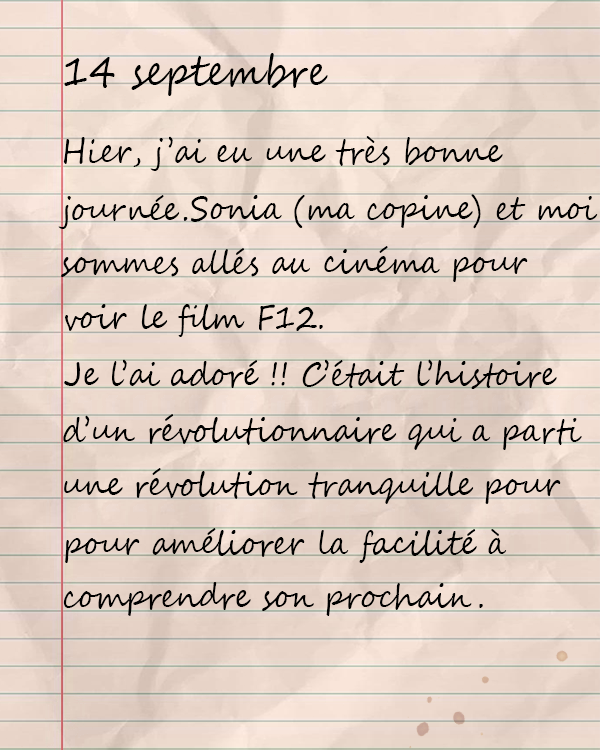
<style>
.page{position:relative;width:600px;height:750px}
.page>*{position:absolute;margin:0}
.t1{font:41.8px "SegoeScript";color:#000000;scale:0.9 1}
.t2{font:33.3px "SegoeScript";color:#000000;scale:0.9 1}
</style>
<div class="page">
<p class="t1" style="left:64px;top:53px;width:264px;height:43px">14 septembre</p>
<p class="t2" style="left:63px;top:136px;width:440px;height:35px">Hier, j’ai eu une très bonne</p>
<p class="t2" style="left:58px;top:195px;width:130px;height:34px">journée.</p>
<p class="t2" style="left:191px;top:194px;width:407px;height:35px">Sonia (ma copine) et moi</p>
<p class="t2" style="left:61px;top:246px;width:467px;height:36px">sommes allés au cinéma pour</p>
<p class="t2" style="left:65px;top:304px;width:258px;height:33px">voir le film F12.</p>
<p class="t2" style="left:64px;top:359px;width:493px;height:30px">Je l’ai adoré !! C’était l’histoire</p>
<p class="t2" style="left:63px;top:414px;width:519px;height:36px">d’un révolutionnaire qui a parti une révolution</p>
<p class="t2" style="left:64px;top:468px;width:497px;height:36px">une révolution tranquille pour</p>
<p class="t2" style="left:65px;top:528px;width:442px;height:35px">pour améliorer la facilité à</p>
<p class="t2" style="left:63px;top:582px;width:420px;height:34px">comprendre son prochain.</p>
</div>
